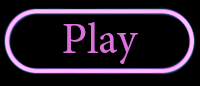
<style>
.page{position:relative;width:200px;height:86px;background:#000000}
.page>*{position:absolute;margin:0}
.t1{font:44.1px "MinionPro-Regular";color:#db72db}
</style>
<div class="page">
<p class="t1" style="left:63px;top:22px;width:75px;height:42px">Play</p>
</div>
